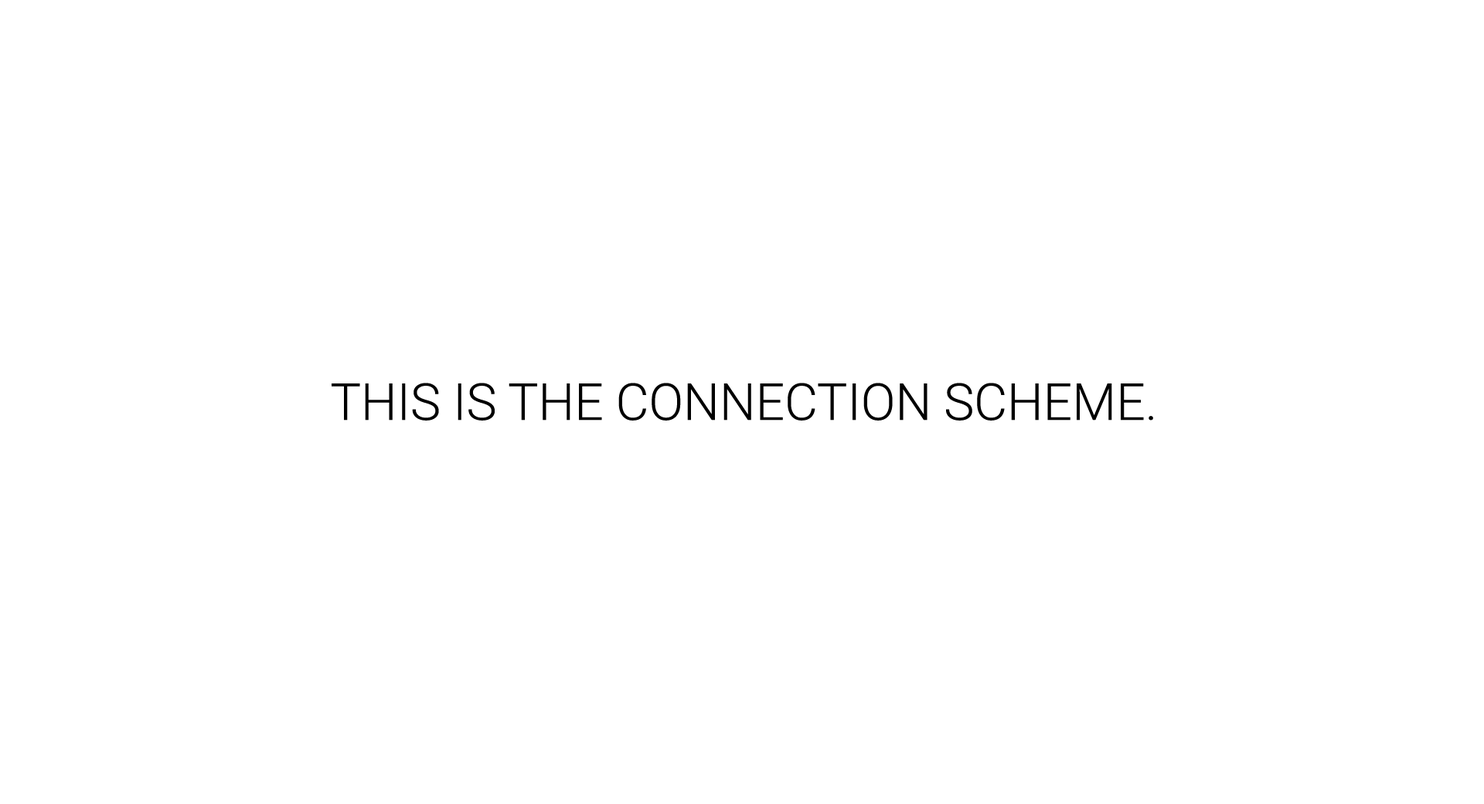
<style>
.page{position:relative;width:1484px;height:804px;background:#ffffff}
.page>*{position:absolute;margin:0}
.t1{font:51px "Roboto-Light";letter-spacing:-0.001em;color:#000000}
</style>
<div class="page">
<p class="t1" style="left:332px;top:383px;width:821px;height:37px">THIS IS THE CONNECTION SCHEME.</p>
</div>
